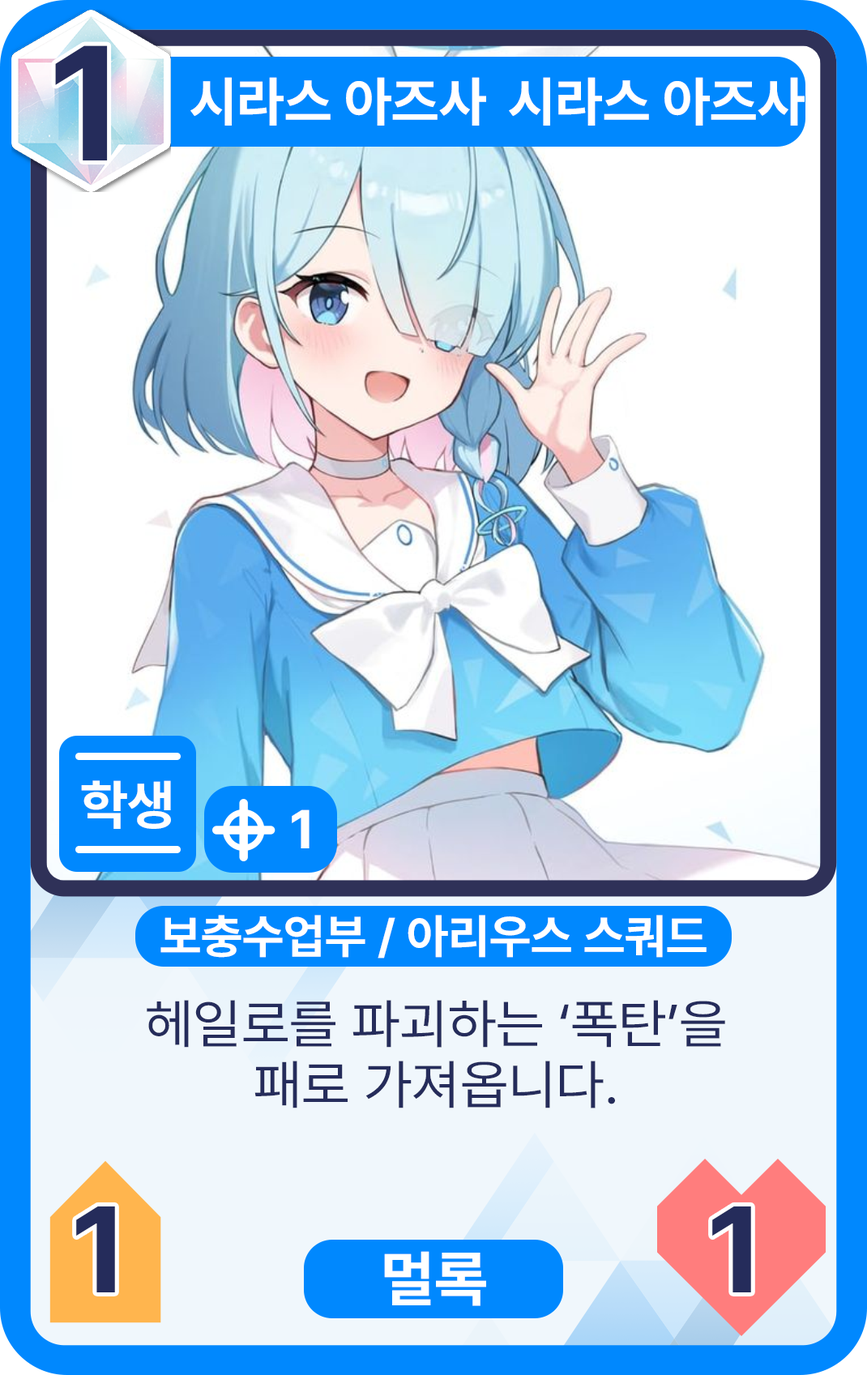
<style>
.page{position:relative;width:867px;height:1375px}
.page>*{position:absolute;margin:0}
.t1{font:162.1px "Pretendard-Bold";color:#252c5b}
.t2{font:54px "Pretendard-Bold";color:#ffffff}
.t3{font:54px "Pretendard-Bold";color:#fefefe}
.t4{font:47.3px "Pretendard-Bold";color:#ffffff}
.t5{font:54px/60.8px "Pretendard-Regular";color:#252c5b;scale:1.03 1}
.t6{font:121.6px "Pretendard-Bold";color:#252c5b}
.t7{font:61.1px "Pretendard-Bold";color:#ffffff}
</style>
<div class="page">
<p class="t1" style="left:55px;top:45px;width:53px;height:115px">1</p>
<p class="t2" style="left:190px;top:77px;width:296px;height:49px">시라스 아즈사</p>
<p class="t2" style="left:509px;top:77px;width:296px;height:49px">시라스 아즈사</p>
<p class="t3" style="left:81px;top:780px;width:90px;height:49px">학생</p>
<p class="t3" style="left:292px;top:810px;width:18px;height:38px">1</p>
<p class="t4" style="left:160px;top:915px;width:547px;height:44px">보충수업부 / 아리우스 스쿼드</p>
<p class="t5" style="left:147px;top:1000px;width:578px;height:109px;text-align:center">헤일로를 파괴하는 ‘폭탄’을<br>패로 가져옵니다.</p>
<p class="t6" style="left:76px;top:1206px;width:39px;height:87px">1</p>
<p class="t6" style="left:712px;top:1206px;width:39px;height:87px">1</p>
<p class="t7" style="left:384px;top:1251px;width:102px;height:55px">멀록</p>
</div>
